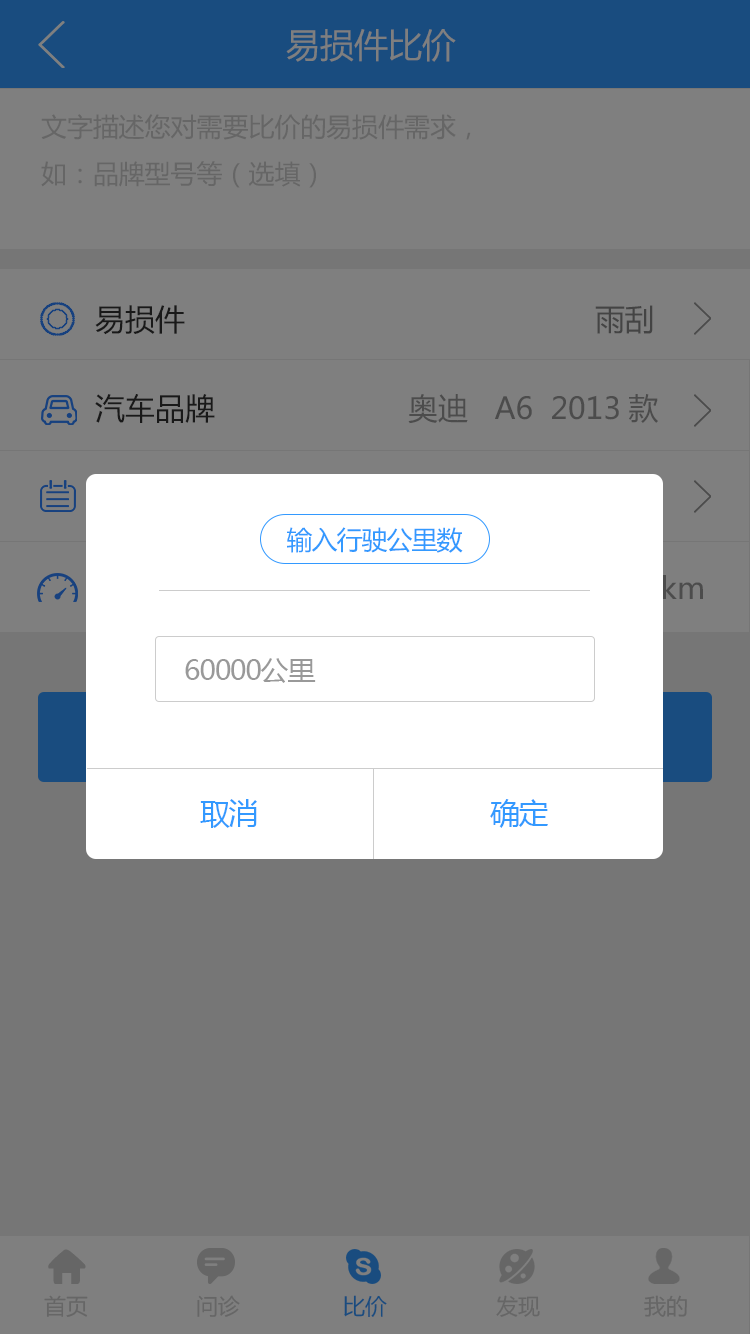
<style>
.page{position:relative;width:750px;height:1334px;background:#7f7f7f}
.page>*{position:absolute;margin:0}
.t1{font:34px "MicrosoftYaHei";color:#7f7f7f}
.t2{font:26px/47px "MicrosoftYaHei";color:#666666}
.t3{font:30px "MicrosoftYaHei";color:#191919}
.t4{font:30px "MicrosoftYaHei";color:#444444}
.t5{font:30px "MicrosoftYaHei";color:#4c4c4c}
.t6{font:26px "MicrosoftYaHei";letter-spacing:-0.04em;color:#3399ff}
.t7{font:28px "MicrosoftYaHei";letter-spacing:-0.04em;color:#999999}
.t8{font:30px "MicrosoftYaHei";letter-spacing:-0.04em;color:#3399ff}
.t9{font:22px "MicrosoftYaHei";color:#666666}
.t10{font:22px "MicrosoftYaHei";color:#194c7f}
</style>
<div class="page">
<p class="t1" style="left:286px;top:28px;width:170px;height:34px">易损件比价</p>
<p class="t2" style="left:41px;top:114px;width:430px;height:74px">文字描述您对需要比价的易损件需求，<br>如：品牌型号等（选填）</p>
<p class="t3" style="left:95px;top:305px;width:90px;height:30px">易损件</p>
<p class="t4" style="left:595px;top:305px;width:58px;height:29px">雨刮</p>
<p class="t3" style="left:95px;top:394px;width:120px;height:29px">汽车品牌</p>
<p class="t5" style="left:408px;top:394px;width:250px;height:30px">奥迪   A6  2013款</p>
<p class="t6" style="left:287px;top:527px;width:176px;height:26px">输入行驶公里数</p>
<p class="t7" style="left:185px;top:658px;width:131px;height:25px">60000公里</p>
<p class="t8" style="left:200px;top:799px;width:57px;height:29px">取消</p>
<p class="t8" style="left:490px;top:799px;width:58px;height:29px">确定</p>
<p class="t9" style="left:44px;top:1295px;width:44px;height:22px">首页</p>
<p class="t9" style="left:197px;top:1295px;width:43px;height:22px">问诊</p>
<p class="t10" style="left:344px;top:1295px;width:43px;height:22px">比价</p>
<p class="t9" style="left:496px;top:1295px;width:44px;height:22px">发现</p>
<p class="t9" style="left:644px;top:1295px;width:43px;height:22px">我的</p>
</div>
